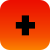
<style>
.page{position:relative;width:50px;height:50px}
.page>*{position:absolute;margin:0}
.t1{font:37.5px "LEMONMILK-Bold";color:#000000}
</style>
<div class="page">
<p class="t1" style="left:15px;top:15px;width:20px;height:21px">+</p>
</div>
